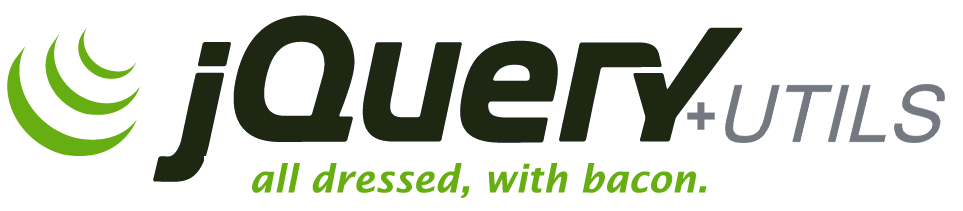
<style>
.page{position:relative;width:963px;height:211px;background:#ffffff}
.page>*{position:absolute;margin:0}
.t1{font:37.8px "LucidaSans-DemiItalic";color:#66ae11}
</style>
<div class="page">
<p class="t1" style="left:252px;top:163px;width:455px;height:35px">all dressed, with bacon.</p>
</div>
